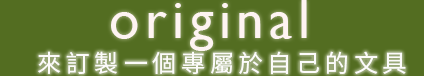
<style>
.page{position:relative;width:424px;height:76px;background:#536d21}
.page>*{position:absolute;margin:0}
.t1{font:55px "GillSansMT";letter-spacing:0.1em;color:#fef4f2}
.t2{font:24px "NotoSansCJKtc-Regular";letter-spacing:0.2em;color:#fcfbfa}
</style>
<div class="page">
<p class="t1" style="left:111px;top:0px;width:196px;height:51px">original</p>
<p class="t2" style="left:38px;top:51px;width:368px;height:24px">來訂製一個專屬於自己的文具</p>
</div>
